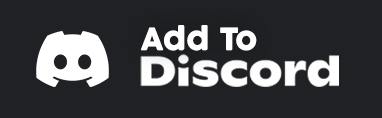
<style>
.page{position:relative;width:382px;height:118px;background:#202124}
.page>*{position:absolute;margin:0}
.t1{font:30.2px "Cocogoose";color:#ffffff}
</style>
<div class="page">
<p class="t1" style="left:141px;top:25px;width:116px;height:26px">Add To</p>
</div>
